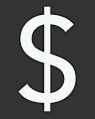
<style>
.page{position:relative;width:95px;height:119px;background:#333333}
.page>*{position:absolute;margin:0}
.t1{font:120px "Avenir-Roman";letter-spacing:0.025em;color:#f5f9f9;text-transform:uppercase}
</style>
<div class="page">
<p class="t1" style="left:18px;top:6px;width:58px;height:106px">$</p>
</div>
